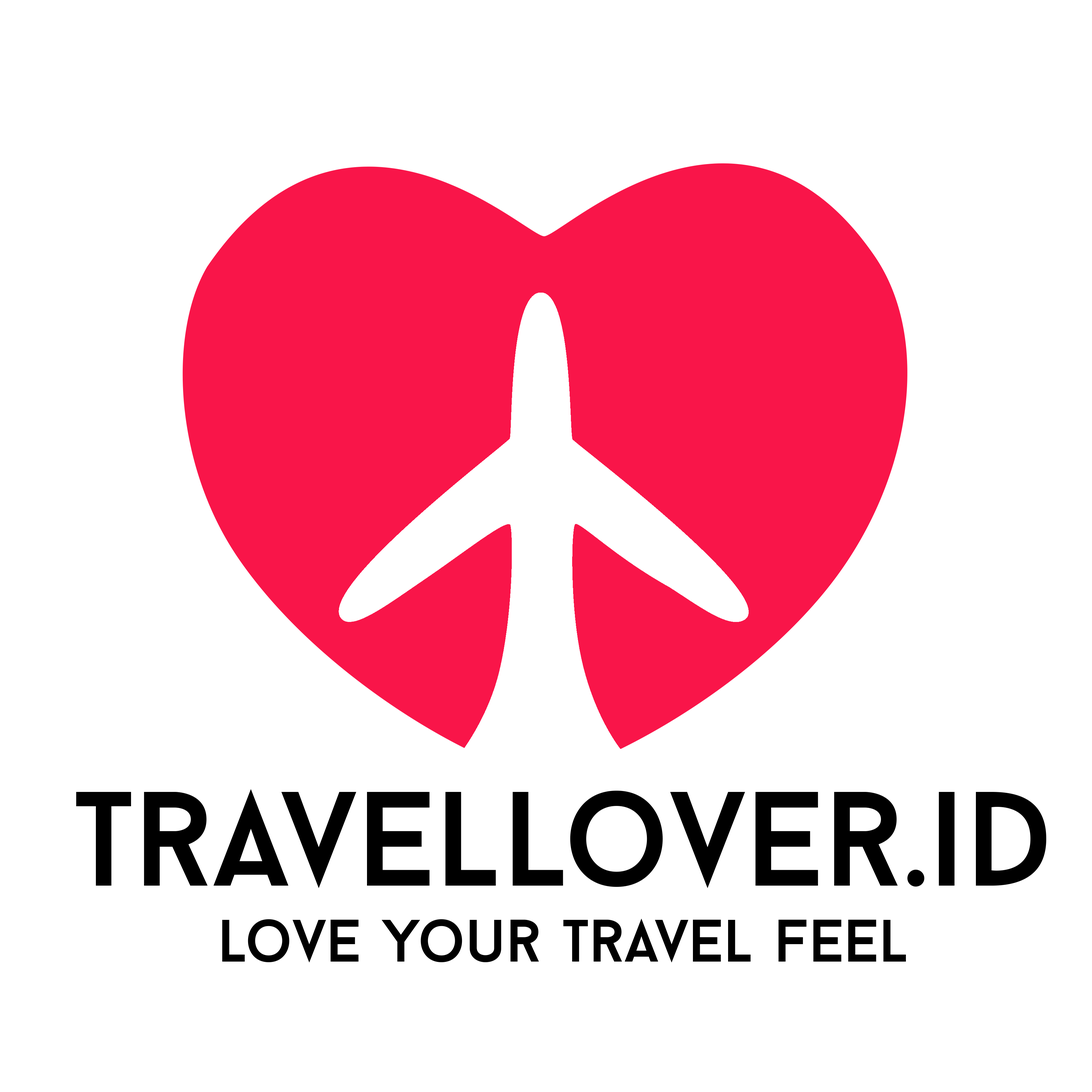
<style>
.page{position:relative;width:1092px;height:1092px;background:#ffffff}
.page>*{position:absolute;margin:0}
.t1{font:133.8px "BaronNeue";color:#000000}
.t2{font:59.7px "BaronNeue";color:#000000}
</style>
<div class="page">
<p class="t1" style="left:76px;top:789px;width:970px;height:99px">travellover.id</p>
<p class="t2" style="left:222px;top:919px;width:684px;height:43px">love your travel feel</p>
</div>
